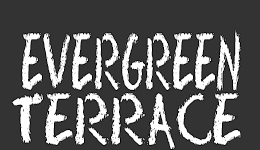
<style>
.page{position:relative;width:260px;height:150px;background:#333333}
.page>*{position:absolute;margin:0}
.t1{font:71.7px "Eraser-Regular";color:#ffffff;scale:0.46 1}
.t2{font:65.3px "Eraser-Regular";color:#ffffff;scale:0.68 1}
</style>
<div class="page">
<p class="t1" style="left:21px;top:30px;width:220px;height:61px">EVERGREEN</p>
<p class="t2" style="left:12px;top:92px;width:229px;height:57px">TERRACE</p>
</div>
